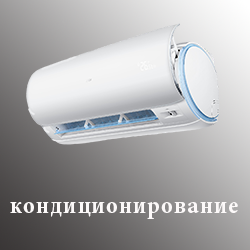
<style>
.page{position:relative;width:250px;height:250px}
.page>*{position:absolute;margin:0}
.t1{font:24px "MinionPro-BoldCnCapt";letter-spacing:0.05em;color:#fcf9f9;font-variant:small-caps}
</style>
<div class="page">
<p class="t1" style="left:10px;top:202px;width:228px;height:17px">кондиционирование</p>
</div>
